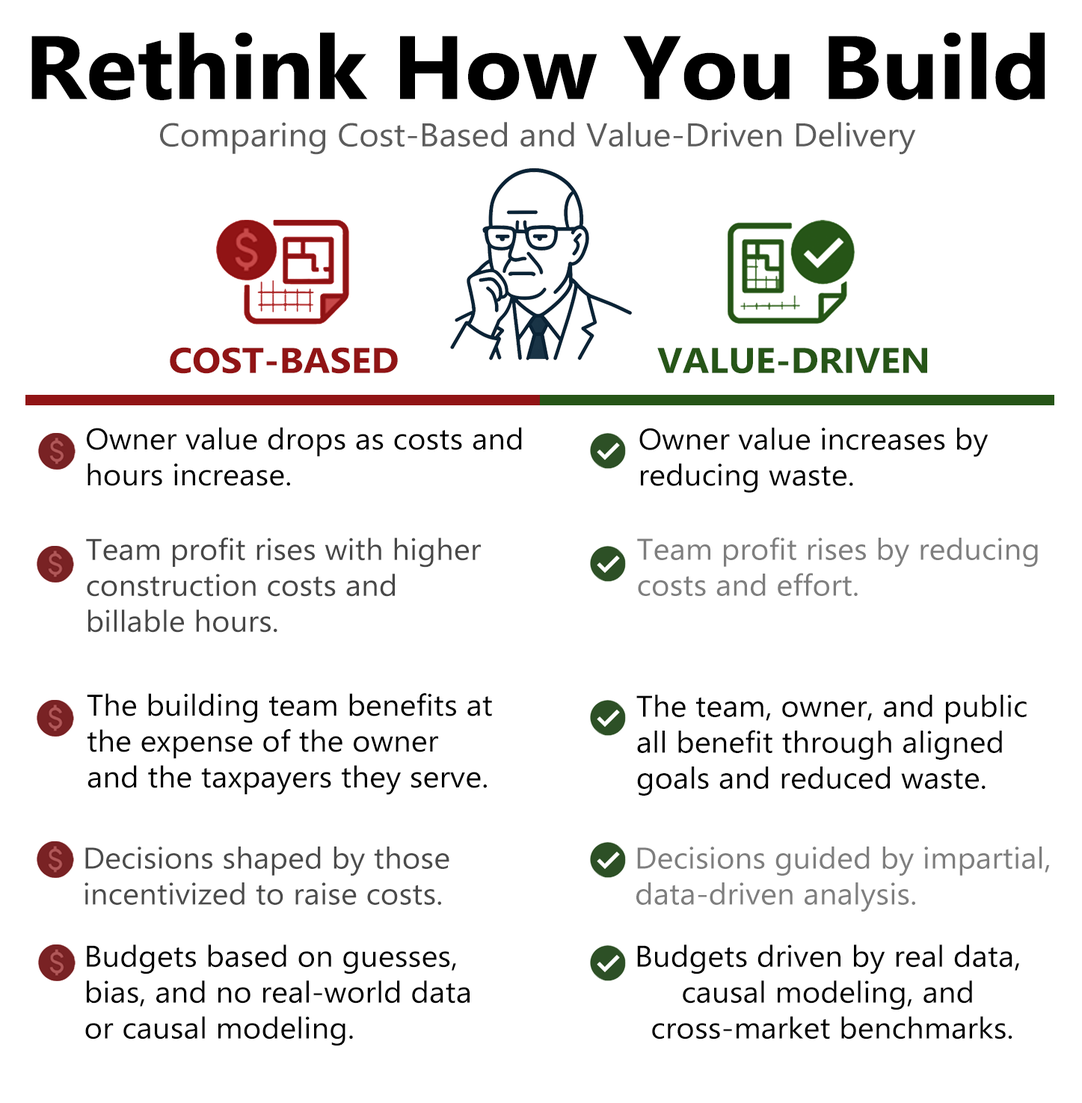
<style>
.page{position:relative;width:1082px;height:1103px;background:#ffffff}
.page>*{position:absolute;margin:0}
.t1{font:89.7px "SegoeUI-Bold";color:#000000;scale:1.05 1}
.t2{font:32.9px "SegoeUI";color:#5c5c5c;scale:1.05 1}
.t3{font:35.9px "SegoeUI-Bold";color:#911415;scale:1.05 1}
.t4{font:35.9px "SegoeUI-Bold";color:#265517;scale:1.05 1}
.t5{font:29.9px "SegoeUI";color:#000000;scale:1.05 1}
.t6{font:29.9px "SegoeUI";color:#474747;scale:1.05 1}
.t7{font:29.9px "SegoeUI";color:#7e7e7e;scale:1.05 1}
.t8{font:29.9px "SegoeUI";color:#4b4b4b;scale:1.05 1}
</style>
<div class="page">
<p class="t1" style="left:31px;top:32px;width:1014px;height:68px">Rethink How You Build</p>
<p class="t2" style="left:160px;top:122px;width:756px;height:33px">Comparing Cost-Based and Value-Driven Delivery</p>
<p class="t3" style="left:170px;top:347px;width:228px;height:27px">COST-BASED</p>
<p class="t4" style="left:657px;top:348px;width:270px;height:26px">VALUE-DRIVEN</p>
<p class="t5" style="left:87px;top:427px;width:435px;height:59px">Owner value drops as costs and <br>hours increase.</p>
<p class="t5" style="left:639px;top:427px;width:349px;height:66px">Owner value increases by <br>reducing waste.</p>
<p class="t6" style="left:86px;top:537px;width:395px;height:95px">Team profit rises with higher <br>construction costs and <br>billable hours.</p>
<p class="t7" style="left:637px;top:537px;width:400px;height:59px">Team profit rises by reducing <br>costs and effort.</p>
<p class="t5" style="left:87px;top:693px;width:405px;height:102px">The building team benefits at<br>the expense of the owner <br>and the taxpayers they serve.</p>
<p class="t5" style="left:636px;top:694px;width:390px;height:101px">The team, owner, and public <br>all benefit through aligned <br>goals and reduced waste.</p>
<p class="t8" style="left:84px;top:846px;width:365px;height:58px">Decisions shaped by those <br>incentivized to raise costs.</p>
<p class="t7" style="left:636px;top:846px;width:413px;height:65px">Decisions guided by impartial, <br>data-driven analysis.</p>
<p class="t5" style="left:85px;top:944px;width:384px;height:102px">Budgets based on guesses, <br>bias, and no real-world data <br>or causal modeling.</p>
<p class="t5" style="left:637px;top:944px;width:382px;height:95px;text-align:center">Budgets driven by real data, <br>causal modeling, and <br>cross-market benchmarks.</p>
</div>
